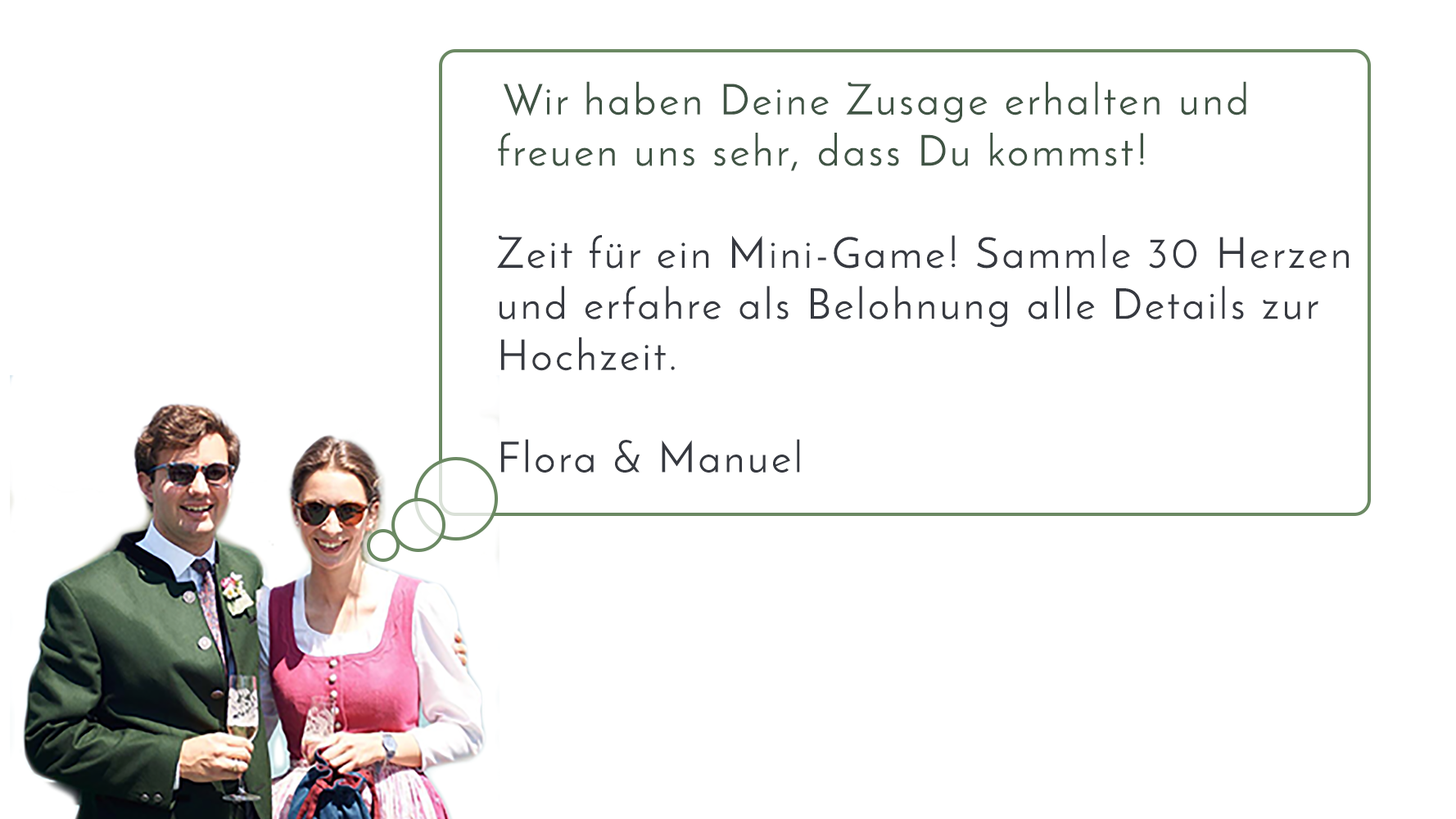
<style>
.page{position:relative;width:1456px;height:819px;background:#ffffff}
.page>*{position:absolute;margin:0}
.t1{font:42.6px "JosefinSans";letter-spacing:0.075em;color:#363940}
.t2{font:42.6px "JosefinSans";letter-spacing:0.075em;color:#405444}
</style>
<div class="page">
<p class="t1" style="left:497px;top:81px;width:852px;height:392px"><span class="t2">Wir haben Deine Zusage erhalten und freuen uns sehr, dass Du kommst!</span> <br><br>Zeit für ein Mini-Game! Sammle 30 Herzen und erfahre als Belohnung alle Details zur Hochzeit.<br><br>Flora &amp; Manuel</p>
</div>
